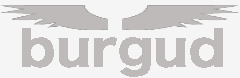
<style>
.page{position:relative;width:240px;height:78px;background:#f5f5f5}
.page>*{position:absolute;margin:0}
.t1{font:48px "HiraKakuStdN-W8";color:#bebaba}
</style>
<div class="page">
<p class="t1" style="left:22px;top:28px;width:201px;height:49px">burgud</p>
</div>
